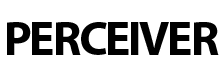
<style>
.page{position:relative;width:222px;height:67px;background:#ffffff}
.page>*{position:absolute;margin:0}
.t1{font:48px "MyriadPro-Bold";letter-spacing:-0.05em;color:#000000}
</style>
<div class="page">
<p class="t1" style="left:7px;top:22px;width:212px;height:33px">PERCEIVER</p>
</div>
